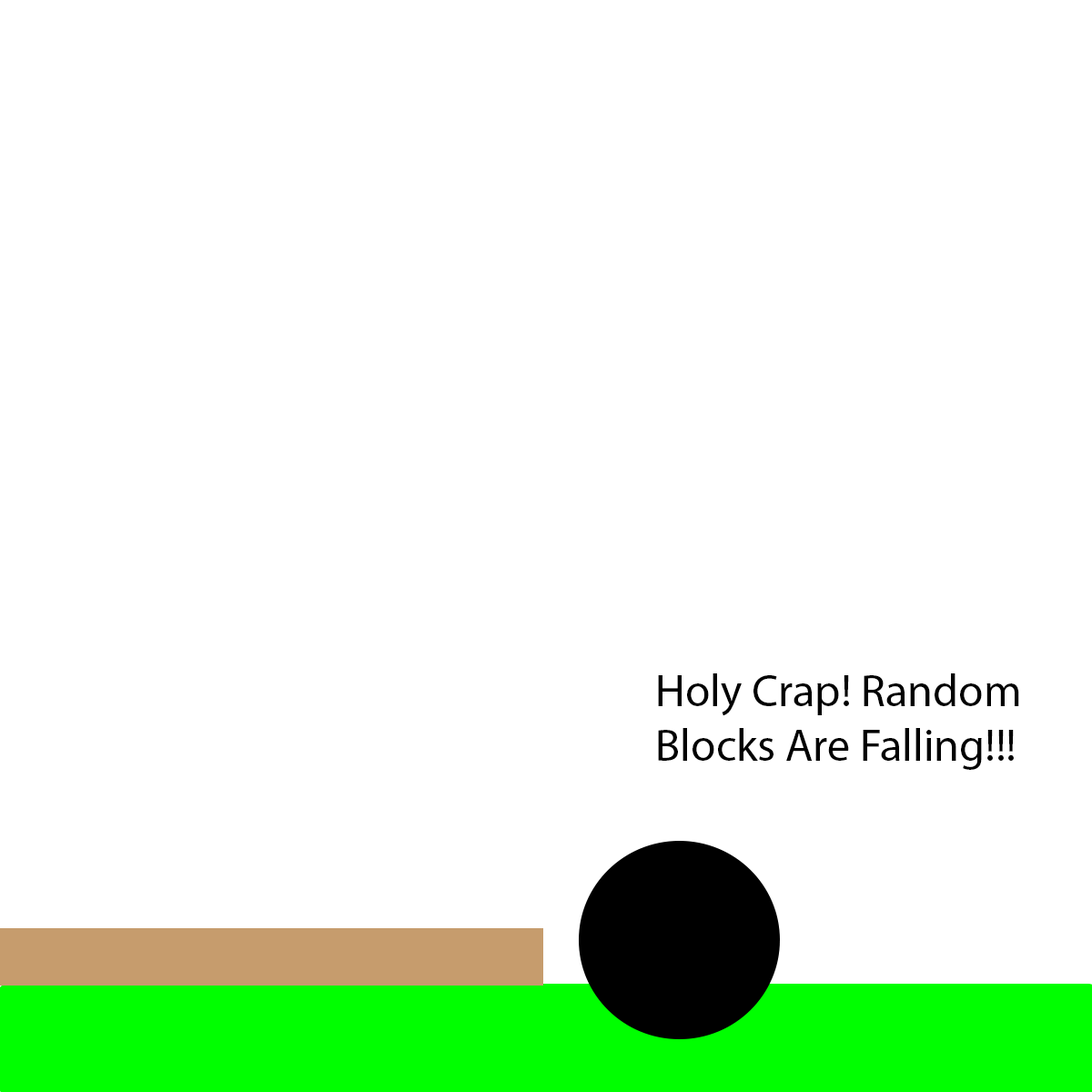
<style>
.page{position:relative;width:1092px;height:1092px;background:#ffffff}
.page>*{position:absolute;margin:0}
.t1{font:45.5px "MyriadPro-Regular";color:#000000}
</style>
<div class="page">
<p class="t1" style="left:658px;top:673px;width:361px;height:97px">Holy Crap! Random <br>Blocks Are Falling!!!</p>
</div>
